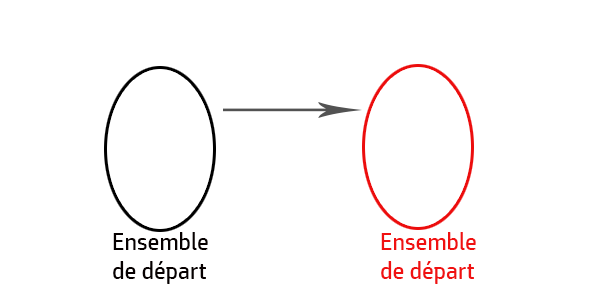
<style>
.page{position:relative;width:600px;height:300px;background:#ffffff}
.page>*{position:absolute;margin:0}
.t1{font:24px "HPSimplified-Regular";color:#060000}
.t2{font:24px "HPSimplified-Regular";color:#f01111}
</style>
<div class="page">
<p class="t1" style="left:113px;top:232px;width:95px;height:52px">Ensemble <br>de départ</p>
<p class="t2" style="left:381px;top:232px;width:95px;height:52px">Ensemble <br>de départ</p>
</div>
